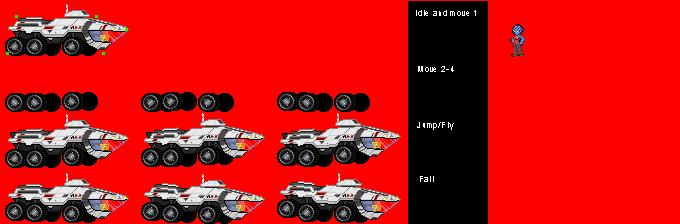
<style>
.page{position:relative;width:680px;height:224px;background:#ff0000}
.page>*{position:absolute;margin:0}
.t1{font:8px "ArialMT";letter-spacing:0.1em;color:#ffffff}
</style>
<div class="page">
<p class="t1" style="left:416px;top:10px;width:60px;height:6px">Idle and move 1</p>
<p class="t1" style="left:418px;top:66px;width:36px;height:6px">Move 2-4</p>
<p class="t1" style="left:417px;top:122px;width:37px;height:8px">Jump/Fly</p>
<p class="t1" style="left:420px;top:176px;width:14px;height:6px">Fall</p>
</div>
